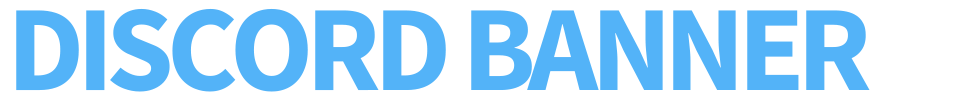
<style>
.page{position:relative;width:960px;height:100px;background:#ffffff}
.page>*{position:absolute;margin:0}
.t1{font:122px "SourceSansPro-Bold";letter-spacing:-0.06em;color:#53b3f8}
</style>
<div class="page">
<p class="t1" style="left:16px;top:8px;width:854px;height:84px">DISCORD BANNER</p>
</div>
